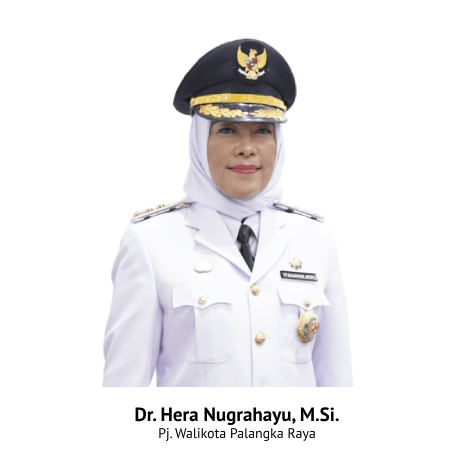
<style>
.page{position:relative;width:474px;height:454px;background:#ffffff}
.page>*{position:absolute;margin:0}
.t1{font:14px "MyriadPro-Regular";color:#000000}
.t2{font:19.1px "MyriadPro-Bold";color:#000000}
</style>
<div class="page">
<p class="t1" style="left:135px;top:407px;width:204px;height:34px;text-align:center"><span class="t2">Dr. Hera Nugrahayu, M.Si.<br></span>Pj. Walikota Palangka Raya</p>
</div>
